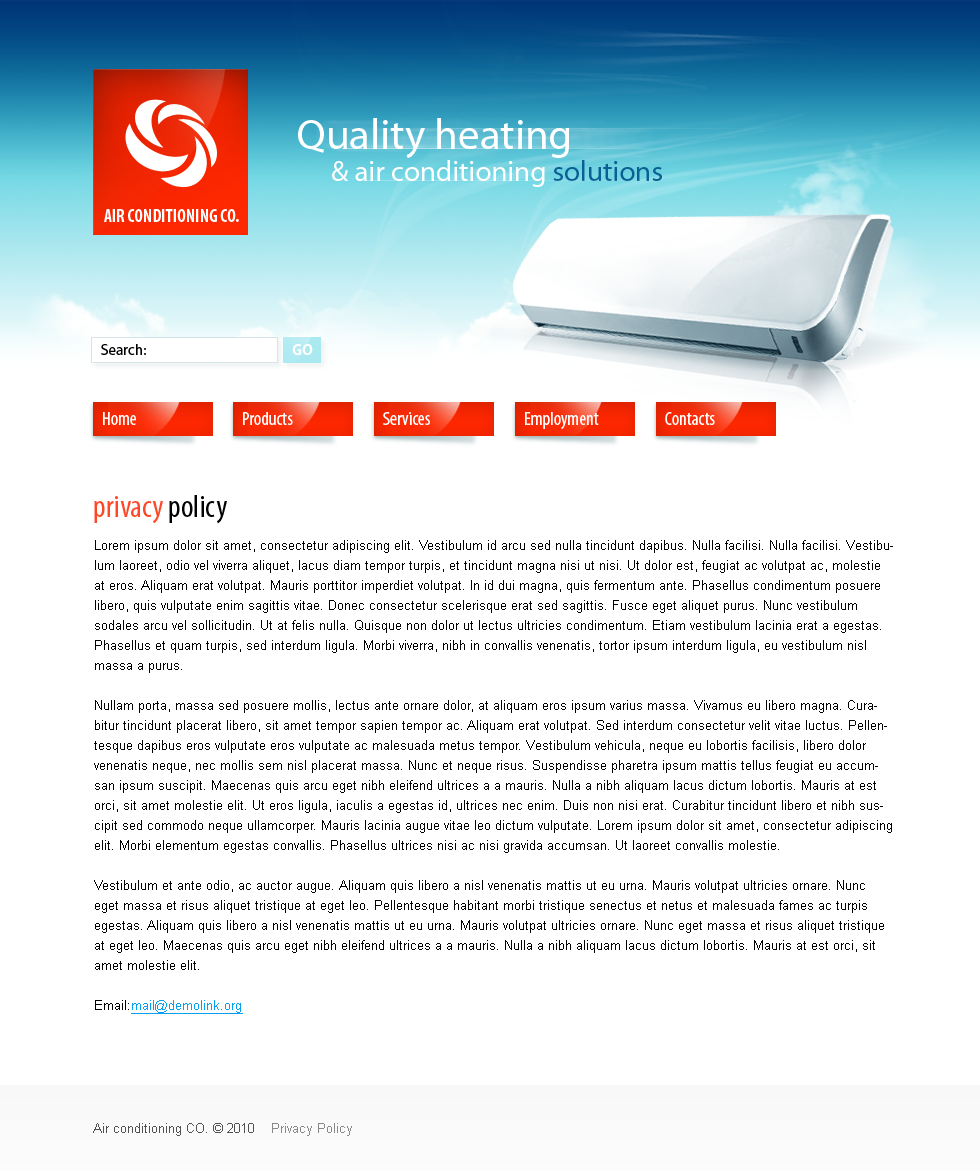
<style>
.page{position:relative;width:980px;height:1170px;background:#ffffff}
.page>*{position:absolute;margin:0}
.t1{font:43px "MyriadPro-Regular";color:#ffffff}
.t2{font:29px "MyriadPro-Regular";color:#ffffff}
.t3{font:29px "MyriadPro-Regular";color:#0a5f93}
.t4{font:18px "MyriadPro-BoldCond";color:#ffffff;text-transform:uppercase}
.t5{font:15px "MyriadPro-Regular";color:#000000}
.t6{font:15px "MyriadPro-Bold";color:#ffffff}
.t7{font:19px "MyriadPro-Cond";color:#ffffff}
.t8{font:32px "MyriadPro-Cond";color:#fe4726}
.t9{font:32px "MyriadPro-Cond";color:#000000}
.t10{font:13px/20px "ArialMT";color:#000000}
.t11{font:13px/20px "ArialMT";color:#05a0ef;text-decoration:underline}
.t12{font:13px "ArialMT";color:#515151}
.t13{font:13px "ArialMT";color:#888888}
</style>
<div class="page">
<p class="t1" style="left:298px;top:118px;width:272px;height:41px">Quality heating</p>
<p class="t2" style="left:332px;top:160px;width:330px;height:27px">&amp; air conditioning <span class="t3">solutions</span></p>
<p class="t4" style="left:104px;top:209px;width:135px;height:13px">Air conditioning CO.</p>
<p class="t5" style="left:101px;top:344px;width:45px;height:11px">Search:</p>
<p class="t6" style="left:292px;top:344px;width:21px;height:11px">GO</p>
<p class="t7" style="left:103px;top:412px;width:33px;height:13px">Home</p>
<p class="t7" style="left:243px;top:412px;width:50px;height:13px">Products</p>
<p class="t7" style="left:383px;top:412px;width:47px;height:13px">Services</p>
<p class="t7" style="left:525px;top:412px;width:74px;height:18px">Employment</p>
<p class="t7" style="left:665px;top:412px;width:50px;height:13px">Contacts</p>
<p class="t8" style="left:94px;top:495px;width:133px;height:29px">privacy<span class="t9"> policy</span></p>
<p class="t10" style="left:94px;top:540px;width:799px;height:474px">Lorem ipsum dolor sit amet, consectetur adipiscing elit. Vestibulum id arcu sed nulla tincidunt dapibus. Nulla facilisi. Nulla facilisi. Vestibulum laoreet, odio vel viverra aliquet, lacus diam tempor turpis, et tincidunt magna nisi ut nisi. Ut dolor est, feugiat ac volutpat ac, molestie at eros. Aliquam erat volutpat. Mauris porttitor imperdiet volutpat. In id dui magna, quis fermentum ante. Phasellus condimentum posuere libero, quis vulputate enim sagittis vitae. Donec consectetur scelerisque erat sed sagittis. Fusce eget aliquet purus. Nunc vestibulum sodales arcu vel sollicitudin. Ut at felis nulla. Quisque non dolor ut lectus ultricies condimentum. Etiam vestibulum lacinia erat a egestas. Phasellus et quam turpis, sed interdum ligula. Morbi viverra, nibh in convallis venenatis, tortor ipsum interdum ligula, eu vestibulum nisl massa a purus.<br><br>Nullam porta, massa sed posuere mollis, lectus ante ornare dolor, at aliquam eros ipsum varius massa. Vivamus eu libero magna. Curabitur tincidunt placerat libero, sit amet tempor sapien tempor ac. Aliquam erat volutpat. Sed interdum consectetur velit vitae luctus. Pellentesque dapibus eros vulputate eros vulputate ac malesuada metus tempor. Vestibulum vehicula, neque eu lobortis facilisis, libero dolor venenatis neque, nec mollis sem nisl placerat massa. Nunc et neque risus. Suspendisse pharetra ipsum mattis tellus feugiat eu accumsan ipsum suscipit. Maecenas quis arcu eget nibh eleifend ultrices a a mauris. Nulla a nibh aliquam lacus dictum lobortis. Mauris at est orci, sit amet molestie elit. Ut eros ligula, iaculis a egestas id, ultrices nec enim. Duis non nisi erat. Curabitur tincidunt libero et nibh suscipit sed commodo neque ullamcorper. Mauris lacinia augue vitae leo dictum vulputate. Lorem ipsum dolor sit amet, consectetur adipiscing elit. Morbi elementum egestas convallis. Phasellus ultrices nisi ac nisi gravida accumsan. Ut laoreet convallis molestie.<br><br>Vestibulum et ante odio, ac auctor augue. Aliquam quis libero a nisl venenatis mattis ut eu urna. Mauris volutpat ultricies ornare. Nunc eget massa et risus aliquet tristique at eget leo. Pellentesque habitant morbi tristique senectus et netus et malesuada fames ac turpis egestas. Aliquam quis libero a nisl venenatis mattis ut eu urna. Mauris volutpat ultricies ornare. Nunc eget massa et risus aliquet tristique at eget leo. Maecenas quis arcu eget nibh eleifend ultrices a a mauris. Nulla a nibh aliquam lacus dictum lobortis. Mauris at est orci, sit amet molestie elit.<br><br>Email:<span class="t11">mail@demolink.org<br></span><br>ac quam consectetur egestas. Morbi porta, augue ut dictum pellentesque, libero tortor pellentesque enim, eu hendrerit sem metus a nisi. Nullam eget lectus vitae lectus blandit lacinia. Suspendisse quis tincidunt massa. Morbi mauris purus, scelerisque vitae malesuada quis, elementum vel felis. Vivamus id condimentum lacus. Vestibulum ac lectus nisl. Integer dapibus mi sit amet nunc posuere in rhoncus lacus rhoncus. Mauris non dui felis, vitae posuere urna.</p>
<p class="t12" style="left:93px;top:1123px;width:259px;height:13px">Air conditioning CO. © 2010<span class="t13">    Privacy Policy</span></p>
</div>
